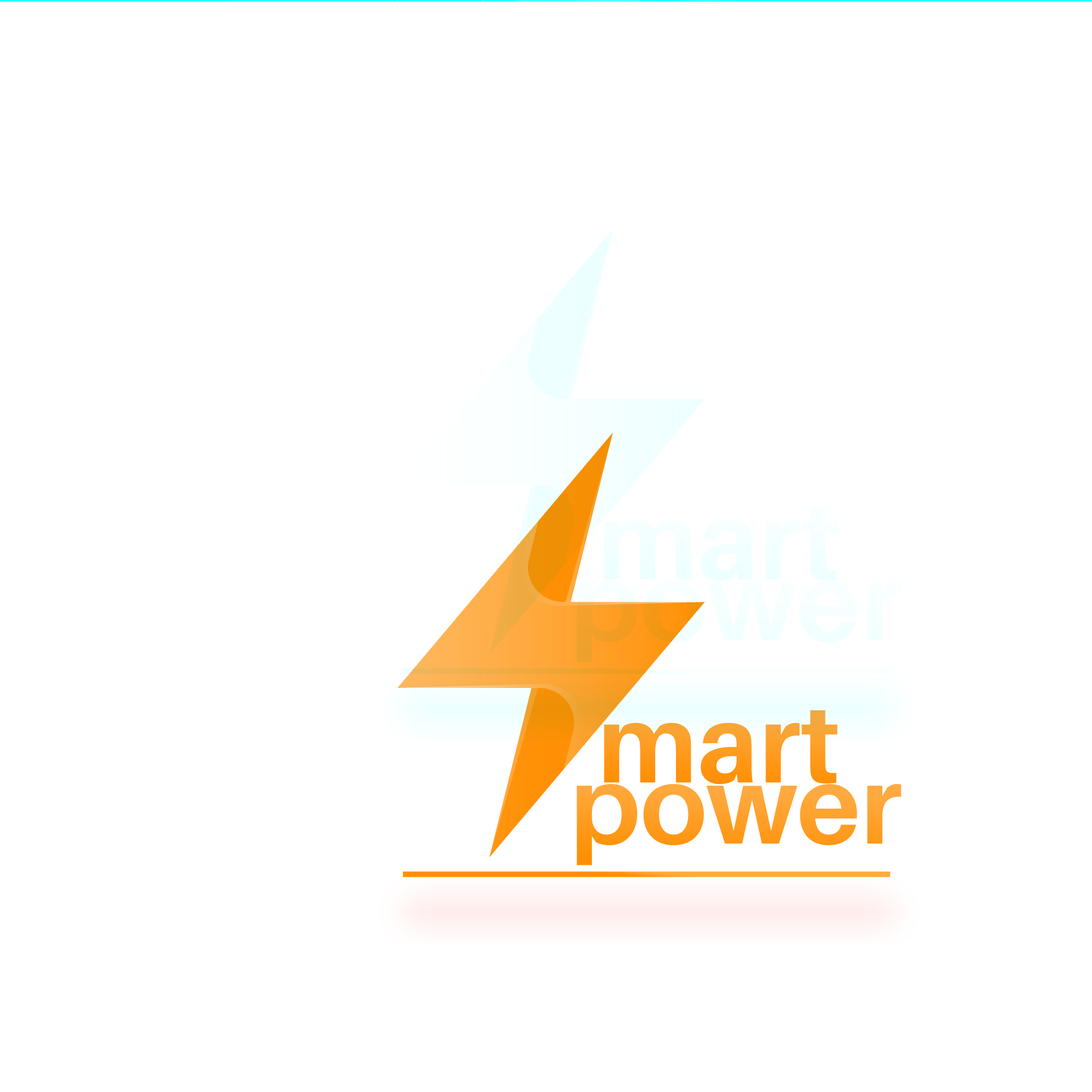
<style>
.page{position:relative;width:1092px;height:1092px;background:#ffffff}
.page>*{position:absolute;margin:0}
.t1{font:109.2px "Aileron-Bold";color:#f3ffff}
.t2{font:109.2px "Aileron-Bold";color:#f5ffff}
</style>
<div class="page">
<p class="t1" style="left:604px;top:505px;width:234px;height:75px">mart</p>
<p class="t2" style="left:577px;top:579px;width:324px;height:82px">power</p>
</div>
